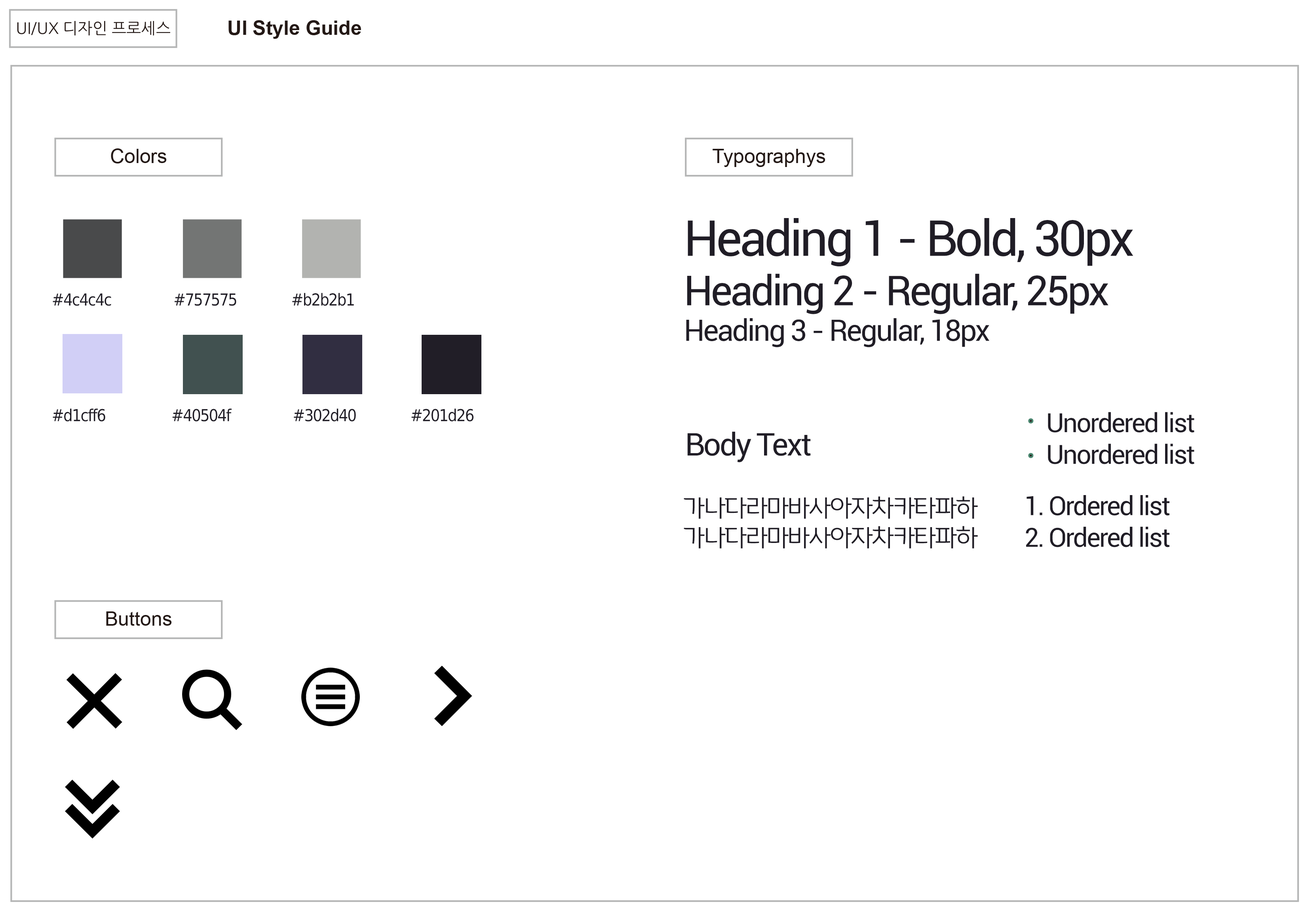
<style>
.page{position:relative;width:1308px;height:911px;background:#ffffff}
.page>*{position:absolute;margin:0}
.t1{font:41.2px "Roboto-Regular";letter-spacing:-0.05em;color:#201d26}
.t2{font:49.5px "Roboto-Regular";letter-spacing:-0.05em;color:#201d26}
.t3{font:29.7px "Roboto-Regular";letter-spacing:-0.05em;color:#201d26}
.t4{font:16.5px "DejaVuSansCondensed";letter-spacing:-0.05em;color:#201d26}
.t5{font:26.4px "Roboto-Regular";letter-spacing:-0.05em;color:#201d26}
.t6{font:31.3px "Roboto-Regular";letter-spacing:-0.05em;color:#201d26}
.t7{font:24.7px "HangeulNuri";letter-spacing:-0.05em;color:#201d26}
</style>
<div class="page">
<p class="t1" style="left:686px;top:218px;width:448px;height:130px"><span class="t2">Heading 1 - Bold, 30px<br></span>Heading 2 - Regular, 25px<br><span class="t3">Heading 3 - Regular, 18px</span></p>
<p class="t4" style="left:53px;top:293px;width:301px;height:13px">#4c4c4c                #757575              #b2b2b1</p>
<p class="t4" style="left:53px;top:409px;width:421px;height:13px">#d1cff6                 #40504f                #302d40              #201d26</p>
<p class="t5" style="left:1048px;top:412px;width:147px;height:52px">Unordered list<br>Unordered list</p>
<p class="t6" style="left:687px;top:432px;width:124px;height:30px">Body Text</p>
<p class="t7" style="left:684px;top:497px;width:294px;height:52px">가나다라마바사아자차카타파하<br>가나다라마바사아자차카타파하</p>
<p class="t5" style="left:1026px;top:495px;width:144px;height:53px">1. Ordered list<br>2. Ordered list</p>
</div>
